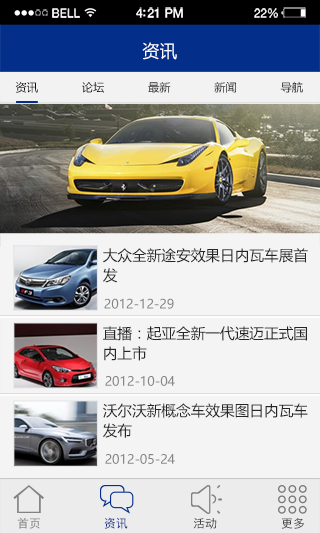
<style>
.page{position:relative;width:320px;height:533px;background:#f5f4f4}
.page>*{position:absolute;margin:0}
.t1{font:11.4px "HelveticaNeue";letter-spacing:0.02em;color:#ffffff}
.t2{font:12.3px "HelveticaNeue-Medium";letter-spacing:-0.02em;color:#ffffff}
.t3{font:11.8px "HelveticaNeue";letter-spacing:-0.02em;color:#ffffff}
.t4{font:17.3px "MicrosoftYaHei";color:#ffffff}
.t5{font:11.3px "MicrosoftYaHei";color:#0c0c0c}
.t6{font:14.7px/20px "MicrosoftYaHei";color:#262525}
.t7{font:12.7px "MicrosoftYaHei";color:#858585}
.t8{font:12px "SimHei";color:#828282}
.t9{font:12px "SimHei";color:#032e8c}
.t10{font:12px "SimHei";color:#464646}
</style>
<div class="page">
<p class="t1" style="left:52px;top:8px;width:28px;height:10px">BELL</p>
<p class="t2" style="left:136px;top:7px;width:47px;height:11px">4:21 PM</p>
<p class="t3" style="left:254px;top:8px;width:24px;height:10px">22%</p>
<p class="t4" style="left:142px;top:42px;width:35px;height:18px">资讯</p>
<p class="t5" style="left:15px;top:81px;width:288px;height:12px">资讯             论坛             最新             新闻             导航</p>
<p class="t6" style="left:103px;top:248px;width:205px;height:35px">大众全新途安效果日内瓦车展首<br>发</p>
<p class="t7" style="left:104px;top:298px;width:70px;height:11px">2012-12-29</p>
<p class="t6" style="left:103px;top:326px;width:204px;height:35px">直播：起亚全新一代速迈正式国<br>内上市</p>
<p class="t7" style="left:105px;top:376px;width:70px;height:10px">2012-10-04</p>
<p class="t6" style="left:103px;top:403px;width:205px;height:35px">沃尔沃新概念车效果图日内瓦车<br>发布</p>
<p class="t7" style="left:105px;top:454px;width:70px;height:10px">2012-05-24</p>
<p class="t8" style="left:17px;top:517px;width:23px;height:12px">首页</p>
<p class="t9" style="left:104px;top:517px;width:24px;height:12px">资讯</p>
<p class="t10" style="left:193px;top:518px;width:24px;height:11px">活动</p>
<p class="t10" style="left:281px;top:517px;width:23px;height:12px">更多</p>
</div>
